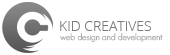
<style>
.page{position:relative;width:170px;height:55px;background:#ffffff}
.page>*{position:absolute;margin:0}
.t1{font:14px "OpenSans-Light";color:#7b7b7b}
.t2{font:9px "GeosansLight";color:#adacac}
</style>
<div class="page">
<p class="t1" style="left:60px;top:21px;width:91px;height:10px">KID CREATIVES</p>
<p class="t2" style="left:60px;top:33px;width:103px;height:9px">web design and development</p>
</div>
